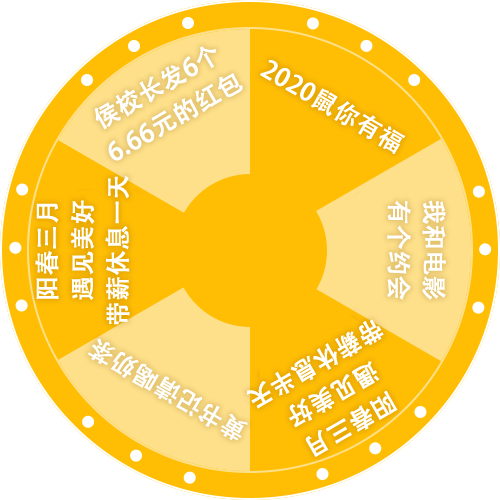
<style>
.page{position:relative;width:500px;height:500px;background:#ffbe04}
.page>*{position:absolute;margin:0}
.t1{font:24.7px/35.3px "AdobeHeitiStd-Regular";color:#ffffff;font-weight:bold}
.t2{font:24.7px "AdobeHeitiStd-Regular";color:#ffffff;font-weight:bold}
</style>
<div class="page">
<p class="t1" style="left:94px;top:46px;width:149px;height:115px;text-align:center;rotate:-30deg">侯校长发6个<br>6.66元的红包</p>
<p class="t2" style="left:260px;top:60px;width:146px;height:94px;rotate:30deg">2020鼠你有福</p>
<p class="t1" style="left:35px;top:175px;width:95px;height:150px;text-align:center;rotate:-90deg">阳春三月<br>遇见美好<br>带薪休息一天</p>
<p class="t1" style="left:387px;top:200px;width:59px;height:100px;text-align:center;rotate:90deg">我和电影<br>有个约会</p>
<p class="t1" style="left:246px;top:319px;width:152px;height:138px;text-align:center;rotate:150deg">阳春三月<br>遇见美好<br>带薪休息半天</p>
<p class="t2" style="left:87px;top:338px;width:161px;height:103px;rotate:-150deg">黄书记请喝奶茶</p>
</div>
